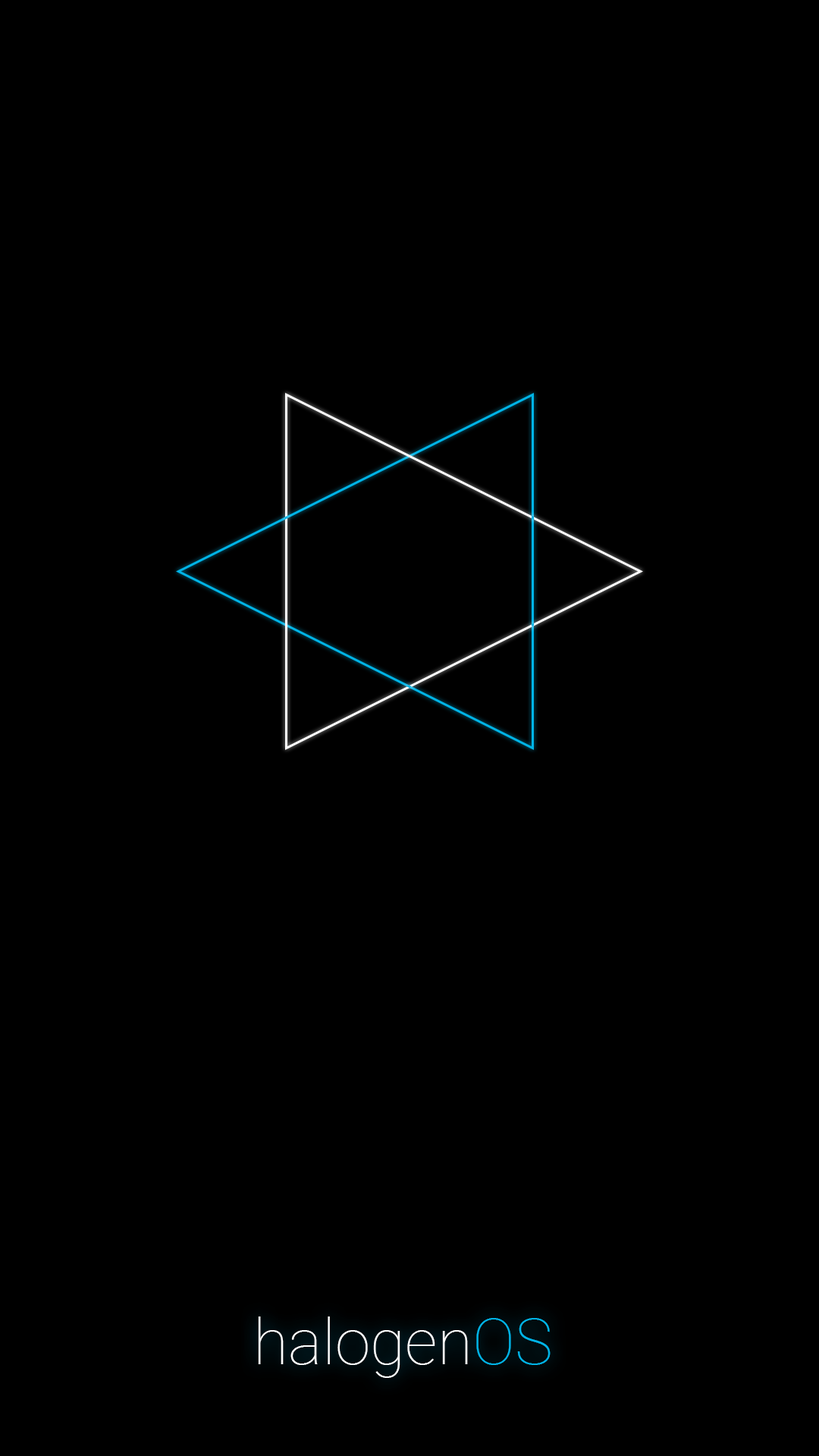
<style>
.page{position:relative;width:819px;height:1456px;background:#000000}
.page>*{position:absolute;margin:0}
.t1{font:63.7px "Roboto-Thin";color:#ffffff}
.t2{font:63.7px "Roboto-Thin";color:#00b4e7}
</style>
<div class="page">
<p class="t1" style="left:258px;top:1316px;width:293px;height:62px">halogen<span class="t2">OS</span></p>
</div>
